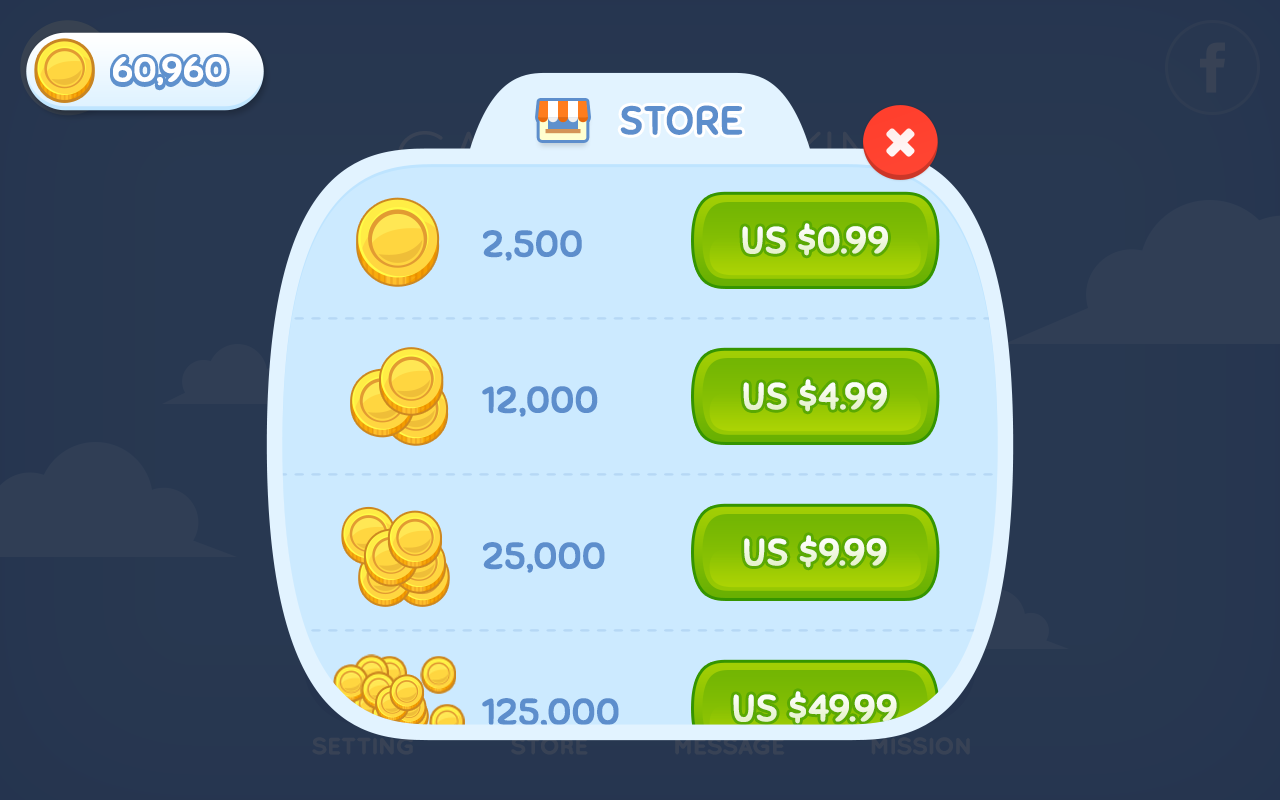
<style>
.page{position:relative;width:1280px;height:800px;background:#cceaff}
.page>*{position:absolute;margin:0}
.t1{font:33.8px "Sniglet-Regular";color:#ffffff;text-transform:uppercase;font-weight:bold;scale:1.11 1}
.t2{font:38.8px "Sniglet-Regular";letter-spacing:-0.025em;color:#5d8ecc;text-transform:uppercase;font-weight:bold;scale:1.06 1}
.t3{font:36.5px/156px "Sniglet-Regular";color:#5d8ecc;font-weight:bold;scale:1.05 1}
.t4{font:36.5px "Sniglet-Regular";color:#f2f8e3;font-weight:bold;scale:1.05 1}
</style>
<div class="page">
<p class="t1" style="left:113px;top:58px;width:114px;height:30px">60,960</p>
<p class="t1" style="left:113px;top:56px;width:114px;height:30px">60,960</p>
<p class="t2" style="left:620px;top:105px;width:123px;height:30px">STORE</p>
<p class="t3" style="left:482px;top:230px;width:137px;height:499px">2,500<br>12,000<br>25,000<br>125,000</p>
<p class="t4" style="left:742px;top:223px;width:146px;height:33px">US $0.99</p>
<p class="t4" style="left:743px;top:379px;width:144px;height:33px">US $4.99</p>
<p class="t4" style="left:744px;top:535px;width:143px;height:33px">US $9.99</p>
<p class="t4" style="left:733px;top:691px;width:164px;height:33px">US $49.99</p>
</div>
